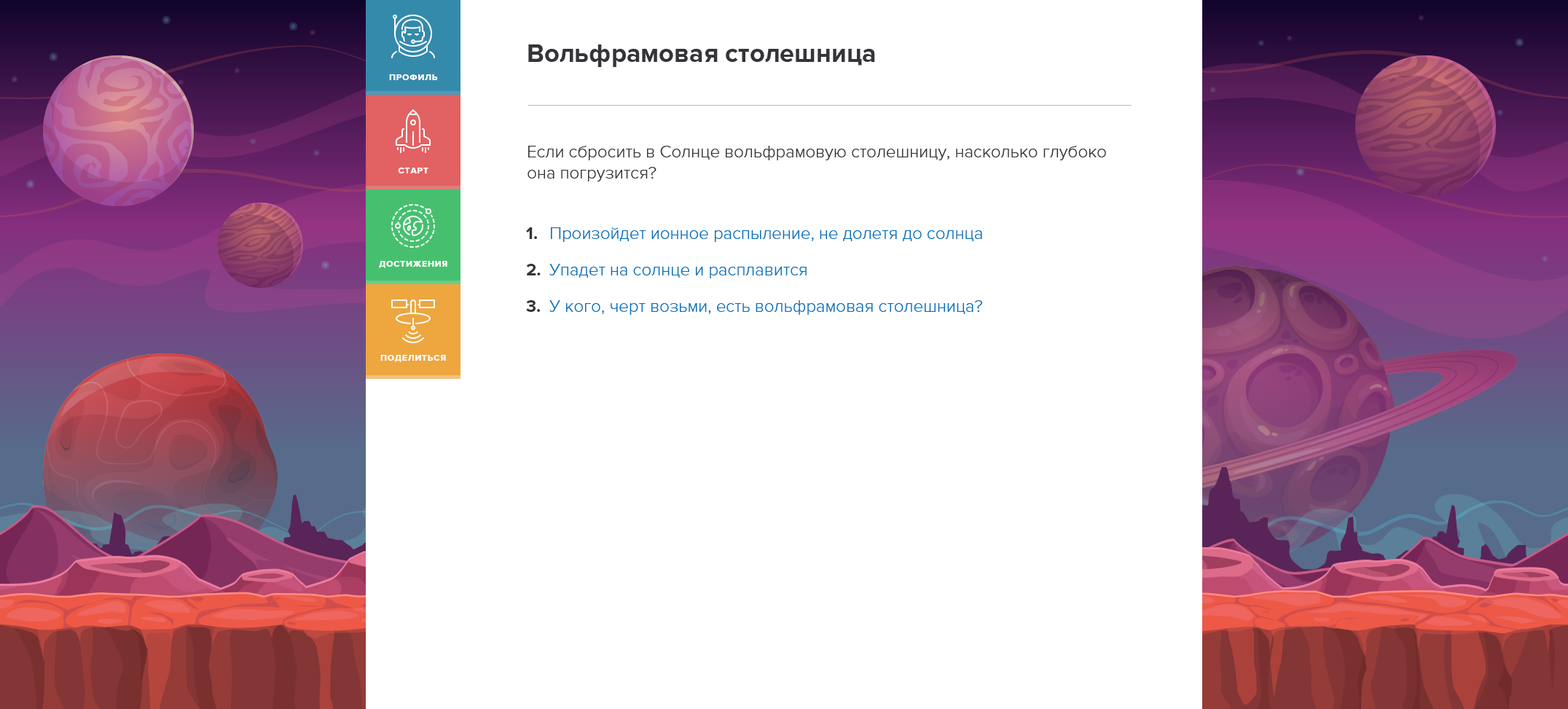
<style>
.page{position:relative;width:1568px;height:709px;background:#ffffff}
.page>*{position:absolute;margin:0}
.t1{font:26.2px "ProximaNova-Bold";color:#343539}
.t2{font:8.7px "ProximaNova-Bold";letter-spacing:0.075em;color:#ffffff;text-transform:uppercase}
.t3{font:17.5px "ProximaNova-Light";color:#343539}
.t4{font:17.5px "ProximaNova-Bold";color:#343539}
.t5{font:17.5px "ProximaNova-Light";color:#0072bc}
</style>
<div class="page">
<p class="t1" style="left:528px;top:44px;width:347px;height:23px">Вольфрамовая столешница</p>
<p class="t2" style="left:389px;top:74px;width:49px;height:6px">профиль</p>
<p class="t3" style="left:528px;top:146px;width:578px;height:35px">Если сбросить в Солнце вольфрамовую столешницу, насколько глубоко она погрузится?</p>
<p class="t2" style="left:398px;top:168px;width:30px;height:5px">старт</p>
<p class="t4" style="left:526px;top:227px;width:11px;height:12px">1.</p>
<p class="t5" style="left:551px;top:227px;width:431px;height:15px">Произойдет ионное распыление, не долетя до солнца</p>
<p class="t2" style="left:379px;top:261px;width:68px;height:7px">достижения</p>
<p class="t4" style="left:526px;top:264px;width:15px;height:11px">2.</p>
<p class="t5" style="left:549px;top:264px;width:258px;height:14px">Упадет на солнце и расплавится</p>
<p class="t4" style="left:526px;top:300px;width:14px;height:12px">3.</p>
<p class="t5" style="left:549px;top:300px;width:433px;height:15px">У кого, черт возьми, есть вольфрамовая столешница?</p>
<p class="t2" style="left:380px;top:355px;width:66px;height:7px">поделиться</p>
</div>
